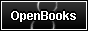
<style>
.page{position:relative;width:88px;height:31px;background:#000000}
.page>*{position:absolute;margin:0}
.t1{font:12px "Arial-BoldMT";color:#ffffff}
</style>
<div class="page">
<p class="t1" style="left:11px;top:11px;width:65px;height:11px">OpenBooks</p>
</div>
